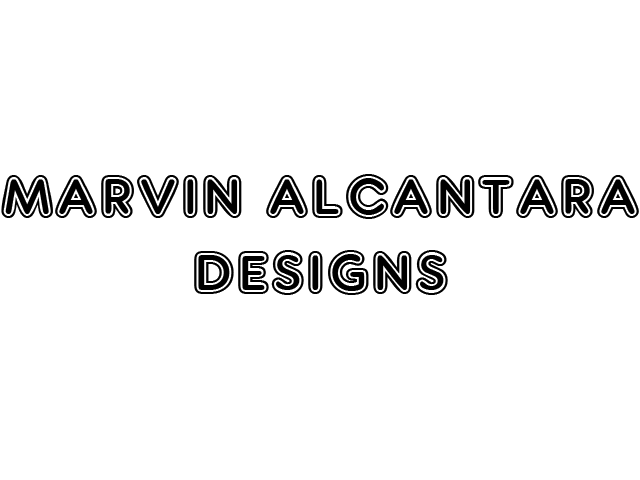
<style>
.page{position:relative;width:640px;height:480px;background:#ffffff}
.page>*{position:absolute;margin:0}
.t1{font:63.6px "ARDELANEY";color:#000000}
</style>
<div class="page">
<p class="t1" style="left:1px;top:174px;width:638px;height:121px;text-align:center">MARVIN ALCANTARA<br>DESIGNS</p>
</div>
